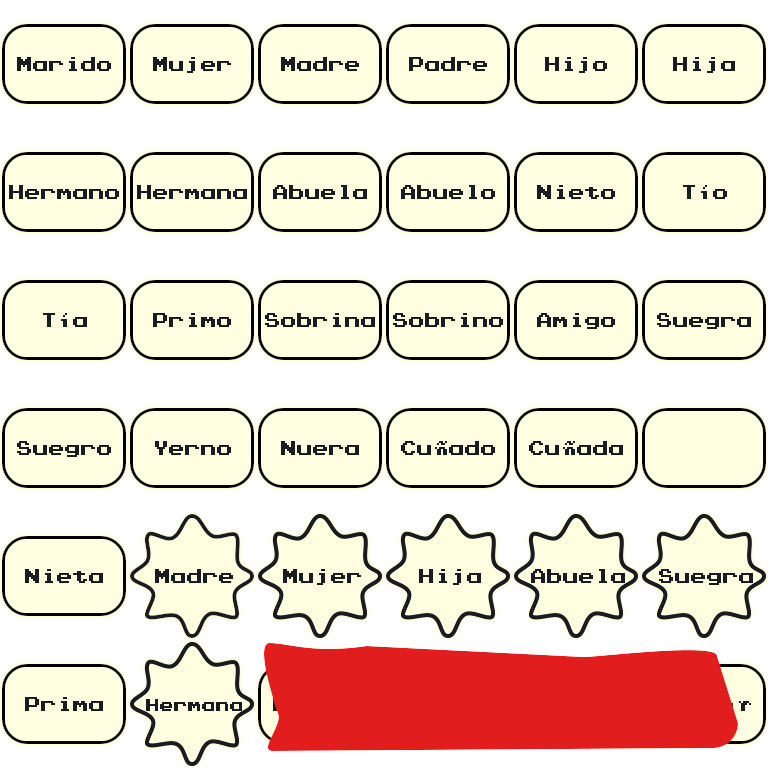
<style>
.page{position:relative;width:768px;height:768px;background:#fffee0}
.page>*{position:absolute;margin:0}
.t1{font:16px "PressStartK";color:#181b1f}
.t2{font:14px "PressStartK";color:#181b1f}
</style>
<div class="page">
<p class="t1" style="left:17px;top:57px;width:94px;height:14px">Marido</p>
<p class="t1" style="left:153px;top:57px;width:78px;height:16px">Mujer</p>
<p class="t1" style="left:281px;top:57px;width:78px;height:14px">Madre</p>
<p class="t1" style="left:409px;top:57px;width:78px;height:14px">Padre</p>
<p class="t1" style="left:545px;top:57px;width:62px;height:16px">Hijo</p>
<p class="t1" style="left:673px;top:57px;width:62px;height:16px">Hija</p>
<p class="t1" style="left:9px;top:185px;width:110px;height:14px">Hermano</p>
<p class="t1" style="left:137px;top:185px;width:110px;height:14px">Hermana</p>
<p class="t1" style="left:273px;top:185px;width:94px;height:14px">Abuela</p>
<p class="t1" style="left:401px;top:185px;width:94px;height:14px">Abuelo</p>
<p class="t1" style="left:537px;top:185px;width:78px;height:14px">Nieto</p>
<p class="t1" style="left:683px;top:185px;width:44px;height:14px">Tío</p>
<p class="t1" style="left:43px;top:313px;width:44px;height:14px">Tía</p>
<p class="t1" style="left:153px;top:313px;width:78px;height:14px">Primo</p>
<p class="t1" style="left:265px;top:313px;width:110px;height:14px">Sobrina</p>
<p class="t1" style="left:393px;top:313px;width:110px;height:14px">Sobrino</p>
<p class="t1" style="left:537px;top:313px;width:78px;height:16px">Amigo</p>
<p class="t1" style="left:657px;top:313px;width:94px;height:16px">Suegra</p>
<p class="t1" style="left:17px;top:441px;width:94px;height:16px">Suegro</p>
<p class="t1" style="left:155px;top:441px;width:76px;height:14px">Yerno</p>
<p class="t1" style="left:281px;top:441px;width:78px;height:14px">Nuera</p>
<p class="t1" style="left:401px;top:441px;width:94px;height:14px">Cuñado</p>
<p class="t1" style="left:529px;top:441px;width:94px;height:14px">Cuñada</p>
<p class="t1" style="left:25px;top:569px;width:78px;height:14px">Nieta</p>
<p class="t1" style="left:155px;top:569px;width:78px;height:14px">Madre</p>
<p class="t1" style="left:283px;top:569px;width:78px;height:16px">Mujer</p>
<p class="t1" style="left:419px;top:569px;width:62px;height:16px">Hija</p>
<p class="t1" style="left:531px;top:569px;width:94px;height:14px">Abuela</p>
<p class="t1" style="left:659px;top:569px;width:94px;height:16px">Suegra</p>
<p class="t1" style="left:25px;top:697px;width:78px;height:14px">Prima</p>
<p class="t2" style="left:146px;top:699px;width:96px;height:12px">Hermana</p>
</div>
